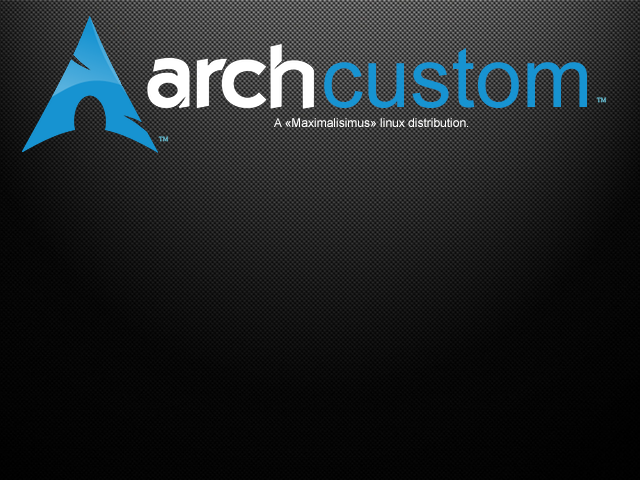
<style>
.page{position:relative;width:640px;height:480px}
.page>*{position:absolute;margin:0}
.t1{font:84px "ArialMT";color:#1793d1}
.t2{font:6px "Georgia";color:#66bace}
.t3{font:12px "ArialMT";color:#ffffff}
</style>
<div class="page">
<p class="t1" style="left:324px;top:48px;width:263px;height:60px">custom</p>
<p class="t2" style="left:596px;top:97px;width:11px;height:6px">TM</p>
<p class="t3" style="left:274px;top:118px;width:194px;height:9px">A «Maximalisimus» linux distribution.</p>
<p class="t2" style="left:158px;top:136px;width:11px;height:6px">TM</p>
</div>
